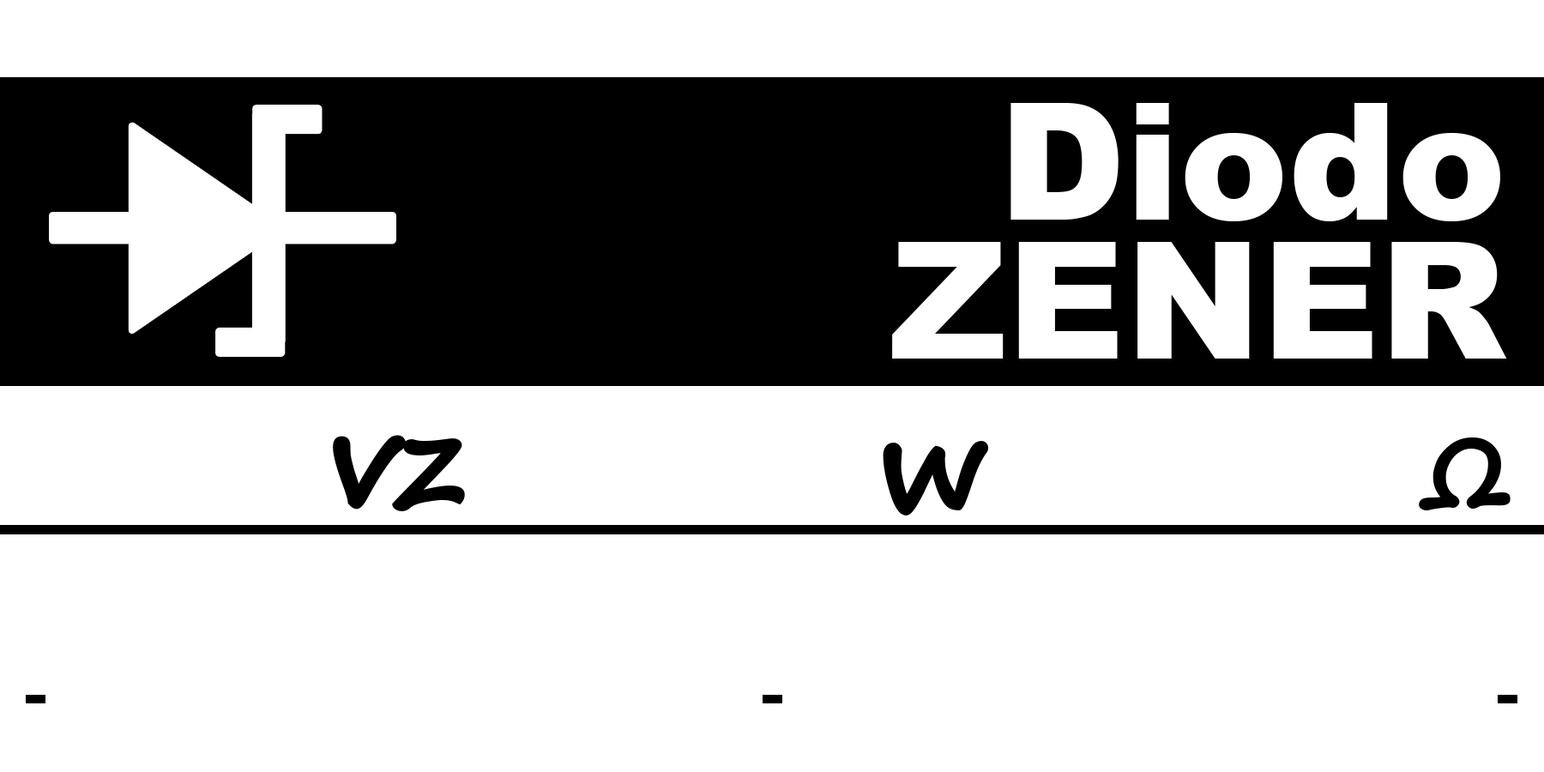
<style>
.page{position:relative;width:1544px;height:772px;background:#ffffff}
.page>*{position:absolute;margin:0}
.t1{font:163.4px "Arial-Black";color:#ffffff}
.t2{font:127.1px "SegoePrint-Bold";letter-spacing:-0.025em;color:#000000;font-weight:bold}
.t3{font:93px "SegoePrint-Bold";letter-spacing:-0.175em;color:#000000;font-weight:bold}
.t4{font:127.1px "SegoePrint-Bold";letter-spacing:-0.15em;color:#000000;font-weight:bold}
</style>
<div class="page">
<p class="t1" style="left:1011px;top:103px;width:490px;height:118px">Diodo</p>
<p class="t1" style="left:892px;top:242px;width:615px;height:117px">ZENER</p>
<p class="t2" style="left:333px;top:435px;width:132px;height:76px">vz</p>
<p class="t3" style="left:1419px;top:438px;width:92px;height:72px">Ω</p>
<p class="t4" style="left:883px;top:441px;width:106px;height:75px">w</p>
</div>
